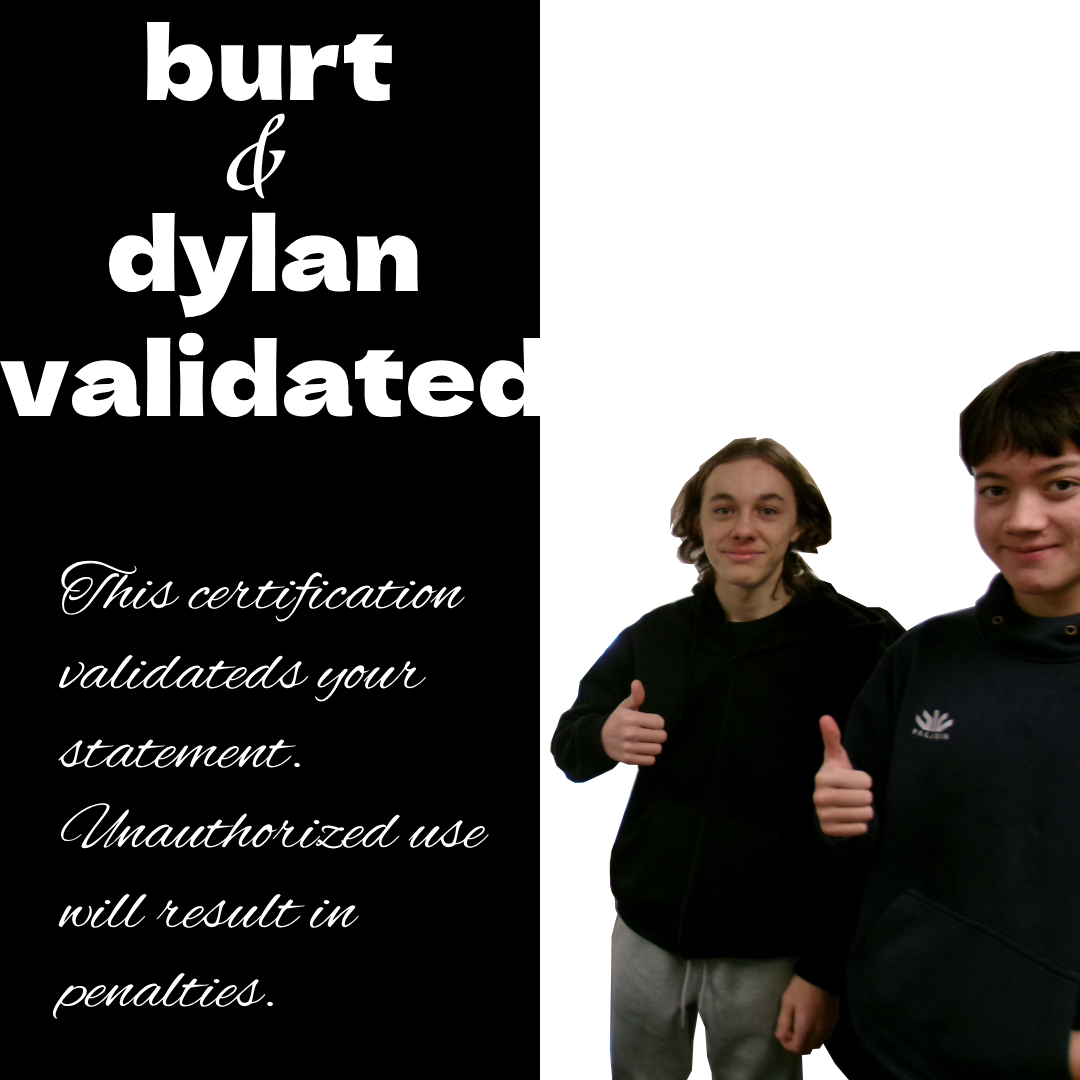
<style>
.page{position:relative;width:1080px;height:1080px;background:#000000}
.page>*{position:absolute;margin:0}
.t1{font:100.3px "DelaGothicOne-Regular";color:#ffffff}
.t2{font:100.3px "AguafinaScript-Regular";color:#ffffff}
.t3{font:66.3px "AlexBrush-Regular";color:#ffffff;scale:1.07 1}
</style>
<div class="page">
<p class="t1" style="left:146px;top:21px;width:246px;height:81px">burt</p>
<p class="t2" style="left:226px;top:113px;width:60px;height:86px">&amp;</p>
<p class="t1" style="left:109px;top:212px;width:309px;height:106px">dylan</p>
<p class="t1" style="left:0px;top:332px;width:546px;height:86px">validated</p>
<p class="t3" style="left:52px;top:560px;width:437px;height:459px">This certification<br>validateds your <br>statement. <br>Unauthorized use <br>will result in <br>penalties.</p>
</div>
